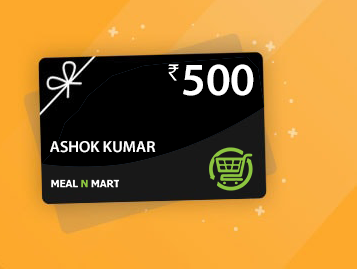
<style>
.page{position:relative;width:357px;height:269px}
.page>*{position:absolute;margin:0}
.t1{font:46.1px "MyriadPro-Semibold";color:#ffffff}
.t2{font:16px "MyriadPro-Semibold";color:#ffffff;text-transform:uppercase}
</style>
<div class="page">
<p class="t1" style="left:183px;top:64px;width:71px;height:32px">500</p>
<p class="t2" style="left:50px;top:141px;width:106px;height:12px">ashok kumar</p>
</div>
